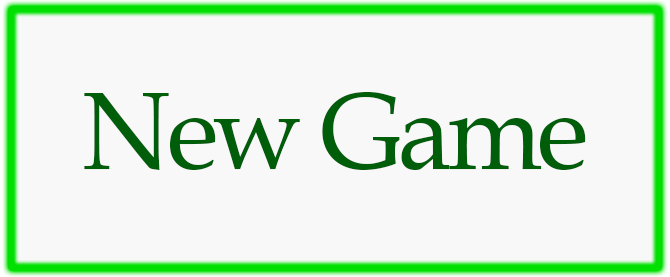
<style>
.page{position:relative;width:670px;height:277px;background:#f9f8f8}
.page>*{position:absolute;margin:0}
.t1{font:110px "BookAntiqua";letter-spacing:-0.04em;color:#005d09;scale:0.97 1}
</style>
<div class="page">
<p class="t1" style="left:84px;top:92px;width:502px;height:78px">New Game</p>
</div>
